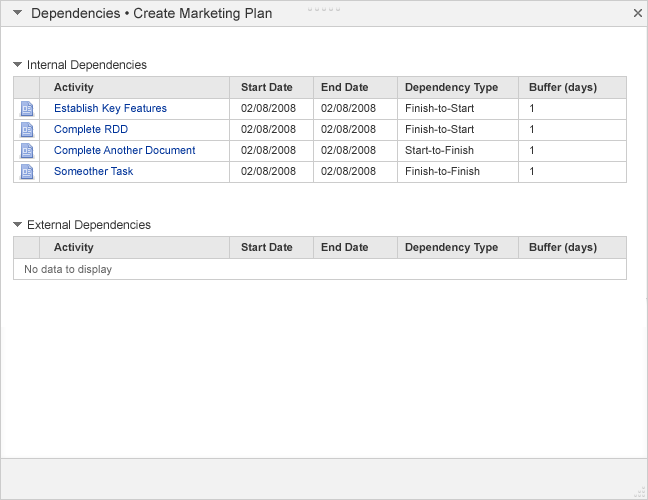
<style>
.page{position:relative;width:648px;height:500px;background:#ffffff}
.page>*{position:absolute;margin:0}
.t1{font:14px "ArialMT";color:#333333}
.t2{font:12px "ArialMT";color:#333333}
.t3{font:11px/21px "ArialMT";color:#003399}
.t4{font:11px/21px "Arial-BoldMT";color:#333333}
.t5{font:11px/21px "ArialMT";color:#333333}
.t6{font:11px "Arial-BoldMT";color:#333333}
.t7{font:11px "ArialMT";color:#666666}
</style>
<div class="page">
<p class="t1" style="left:32px;top:7px;width:240px;height:14px">Dependencies • Create Marketing Plan</p>
<p class="t2" style="left:28px;top:60px;width:119px;height:12px">Internal Dependencies</p>
<p class="t3" style="left:54px;top:83px;width:142px;height:92px"><span class="t4">Activity<br></span>Establish Key Features<br>Complete RDD<br>Complete Another Document<br>Someother Task</p>
<p class="t5" style="left:241px;top:83px;width:55px;height:92px"><span class="t4">Start Date<br></span>02/08/2008<br>02/08/2008<br>02/08/2008<br>02/08/2008</p>
<p class="t5" style="left:321px;top:83px;width:55px;height:92px"><span class="t4">End Date<br></span>02/08/2008<br>02/08/2008<br>02/08/2008<br>02/08/2008</p>
<p class="t5" style="left:405px;top:83px;width:93px;height:92px"><span class="t4">Dependency Type<br></span>Finish-to-Start<br>Finish-to-Start<br>Start-to-Finish<br>Finish-to-Finish</p>
<p class="t4" style="left:529px;top:83px;width:68px;height:92px">Buffer (days)<br><span class="t5">1<br>1<br>1<br>1</span></p>
<p class="t2" style="left:28px;top:220px;width:123px;height:12px">External Dependencies</p>
<p class="t6" style="left:54px;top:243px;width:40px;height:11px">Activity</p>
<p class="t6" style="left:241px;top:243px;width:52px;height:8px">Start Date</p>
<p class="t6" style="left:321px;top:243px;width:47px;height:8px">End Date</p>
<p class="t6" style="left:405px;top:243px;width:93px;height:11px">Dependency Type</p>
<p class="t6" style="left:529px;top:243px;width:68px;height:11px">Buffer (days)</p>
<p class="t7" style="left:25px;top:265px;width:87px;height:11px">No data to display</p>
</div>
